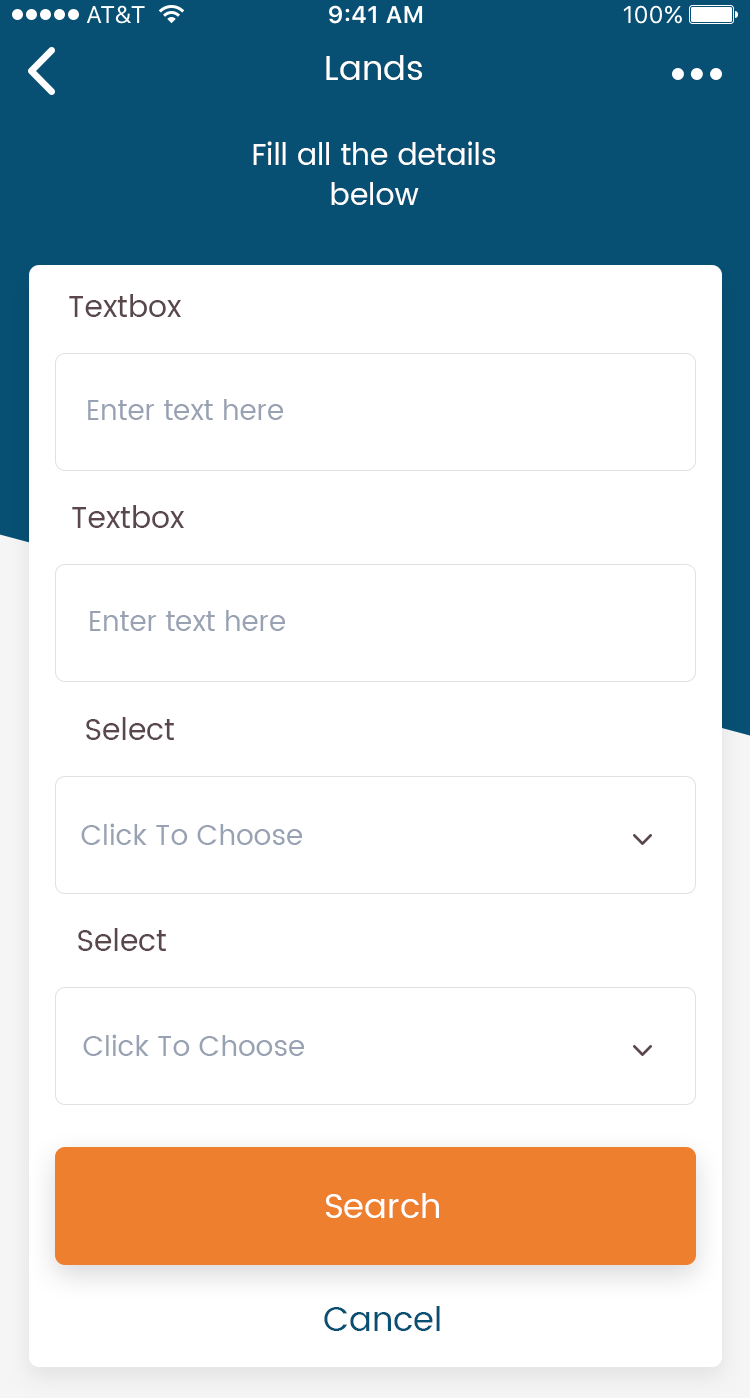
<style>
.page{position:relative;width:750px;height:1398px;background:#ffffff}
.page>*{position:absolute;margin:0}
.t1{font:34px "Poppins-Regular";color:#ffffff}
.t2{font:30px/40px "Poppins-Regular";color:#ffffff}
.t3{font:30px "Poppins-Regular";color:#59474b}
.t4{font:28px "Poppins-Regular";color:#99a2b3}
.t5{font:34px "Poppins-Regular";color:#075073}
</style>
<div class="page">
<p class="t1" style="left:326px;top:55px;width:96px;height:25px">Lands</p>
<p class="t2" style="left:253px;top:141px;width:243px;height:64px;text-align:center">Fill all the details<br>below</p>
<p class="t3" style="left:69px;top:294px;width:112px;height:23px">Textbox</p>
<p class="t4" style="left:88px;top:399px;width:195px;height:21px">Enter text here</p>
<p class="t3" style="left:72px;top:505px;width:112px;height:23px">Textbox</p>
<p class="t4" style="left:90px;top:610px;width:195px;height:21px">Enter text here</p>
<p class="t3" style="left:86px;top:717px;width:88px;height:23px">Select</p>
<p class="t4" style="left:81px;top:823px;width:221px;height:22px">Click To Choose</p>
<p class="t3" style="left:78px;top:928px;width:88px;height:23px">Select</p>
<p class="t4" style="left:83px;top:1034px;width:221px;height:22px">Click To Choose</p>
<p class="t1" style="left:326px;top:1193px;width:113px;height:25px">Search</p>
<p class="t5" style="left:324px;top:1306px;width:116px;height:25px">Cancel</p>
</div>
